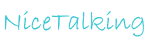
<style>
.page{position:relative;width:150px;height:40px;background:#ffffff}
.page>*{position:absolute;margin:0}
.t1{font:27px "BradleyHandITC";color:#32c5d2}
</style>
<div class="page">
<p class="t1" style="left:4px;top:11px;width:140px;height:26px">NiceTalking</p>
</div>
